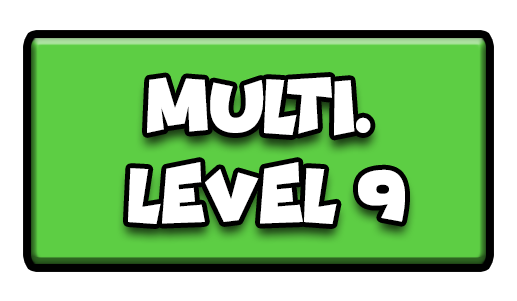
<style>
.page{position:relative;width:517px;height:301px;background:#ffffff}
.page>*{position:absolute;margin:0}
.t1{font:77.7px "Funhouse";color:#ffffff;scale:0.95 1}
</style>
<div class="page">
<p class="t1" style="left:147px;top:77px;width:224px;height:59px">MULTI.</p>
<p class="t1" style="left:128px;top:162px;width:277px;height:62px">LEVEL 9</p>
</div>
